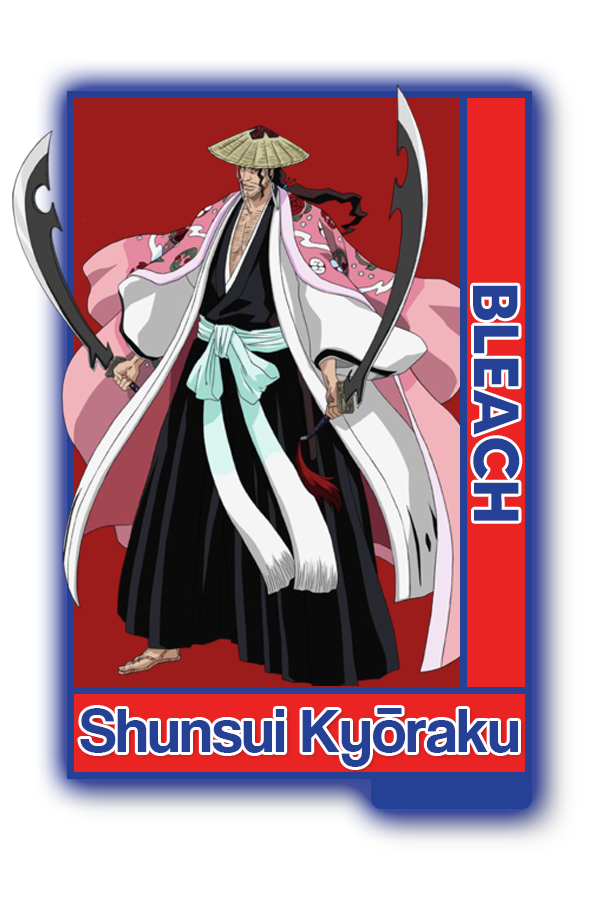
<style>
.page{position:relative;width:600px;height:900px;background:#ffffff}
.page>*{position:absolute;margin:0}
.t1{font:63.6px "MADETOMMY-Bold";color:#254195}
.t2{font:63.6px "CoolveticaRg-Regular";color:#254195}
</style>
<div class="page">
<p class="t1" style="left:473px;top:285px;width:47px;height:236px;rotate:90deg">BLEACH</p>
<p class="t2" style="left:80px;top:708px;width:438px;height:59px">Shunsui Kyōraku</p>
</div>
